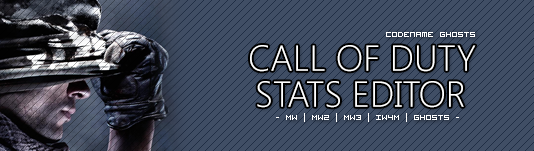
<style>
.page{position:relative;width:534px;height:151px;background:#404e65}
.page>*{position:absolute;margin:0}
.t1{font:10px "VisitorTT1BRK";color:#ffffff}
.t2{font:36px "SegoeUI-Light";color:#ffffff}
</style>
<div class="page">
<p class="t1" style="left:386px;top:32px;width:89px;height:5px">codename ghosts</p>
<p class="t2" style="left:250px;top:45px;width:226px;height:27px">CALL OF DUTY</p>
<p class="t2" style="left:257px;top:81px;width:207px;height:27px">STATS EDITOR</p>
<p class="t1" style="left:276px;top:113px;width:183px;height:9px">- MW | MW2 | MW3 | IW4M | GHOSTS -</p>
</div>
